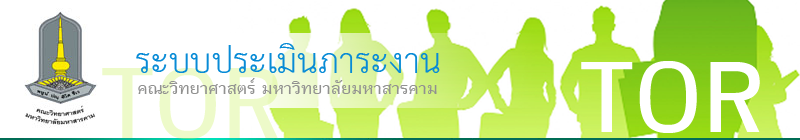
<style>
.page{position:relative;width:800px;height:140px;background:#ffffff}
.page>*{position:absolute;margin:0}
.t1{font:50px "THSarabunPSK";color:#088bd6}
.t2{font:144.7px "THKrub-Bold";color:#ffffff}
.t3{font:142.5px "THKrub-Bold";color:#edfac9}
.t4{font:22.8px "THKrub-Bold";color:#919190}
</style>
<div class="page">
<p class="t1" style="left:136px;top:43px;width:304px;height:30px">ระบบประเมินภาระงาน</p>
<p class="t2" style="left:581px;top:61px;width:179px;height:72px">TOR</p>
<p class="t3" style="left:102px;top:68px;width:176px;height:71px">TOR</p>
<p class="t4" style="left:138px;top:78px;width:299px;height:16px">คณะวิทยาศาสตร์ มหาวิทยาลัยมหาสารคาม</p>
</div>
